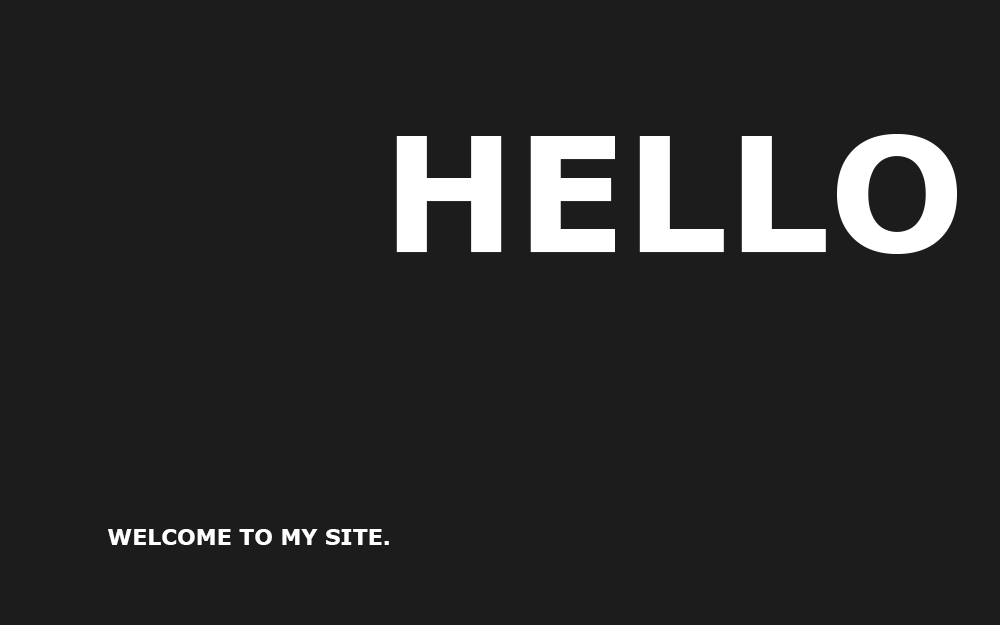
<style>
.page{position:relative;width:1000px;height:625px;background:#1b1c1b}
.page>*{position:absolute;margin:0}
.t1{font:160px "Verdana-Bold";color:#ffffff}
.t2{font:22px "Verdana-Bold";color:#fefefe}
</style>
<div class="page">
<p class="t1" style="left:396px;top:134px;width:561px;height:120px">HELLO</p>
<p class="t2" style="left:108px;top:529px;width:281px;height:16px">WELCOME TO MY SITE.</p>
</div>
